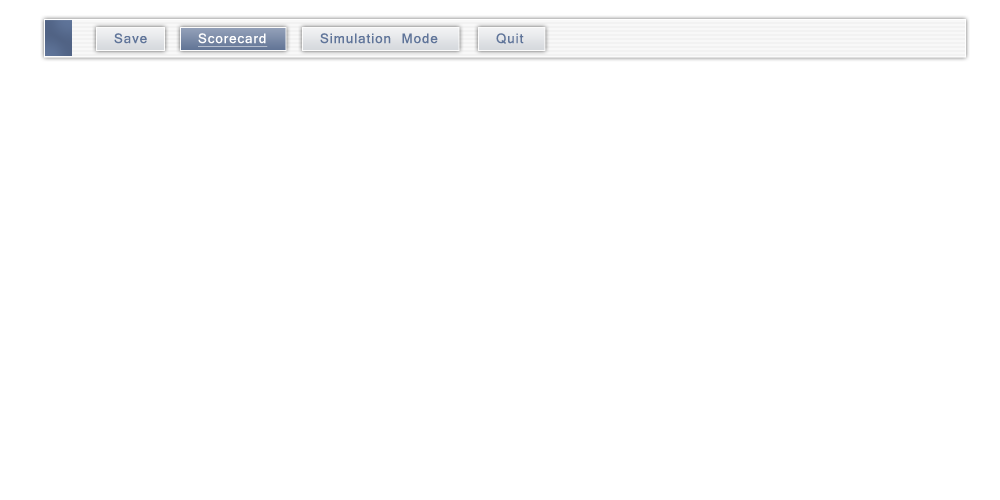
<style>
.page{position:relative;width:1000px;height:500px;background:#ffffff}
.page>*{position:absolute;margin:0}
.t1{font:20px "Vrinda";letter-spacing:0.05em;color:#5f7499}
.t2{font:20px "Vrinda";letter-spacing:0.05em;color:#5f7499;text-transform:uppercase}
.t3{font:20px "Vrinda";letter-spacing:0.05em;color:#ffffff;text-decoration:underline}
</style>
<div class="page">
<p class="t1" style="left:114px;top:33px;width:33px;height:11px"><span class="t2">S</span>ave</p>
<p class="t3" style="left:198px;top:33px;width:70px;height:14px">Scorecard</p>
<p class="t1" style="left:320px;top:33px;width:118px;height:11px">Simulation Mode</p>
<p class="t1" style="left:496px;top:33px;width:28px;height:11px">Quit</p>
</div>
